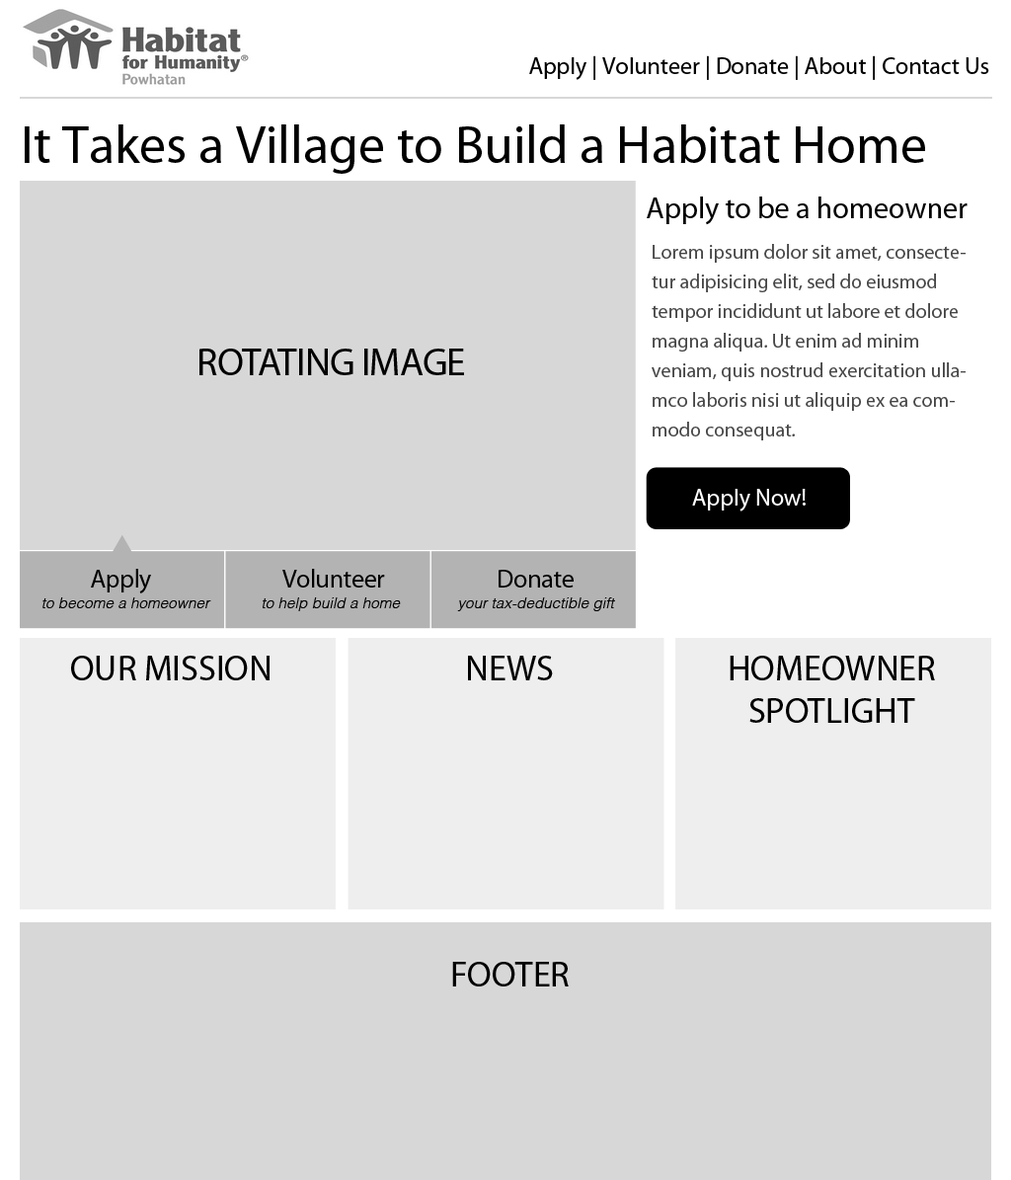
<style>
.page{position:relative;width:1011px;height:1180px;background:#d7d7d7}
.page>*{position:absolute;margin:0}
.t1{font:23.7px "MyriadPro-Regular";color:#010000}
.t2{font:53.3px "MyriadPro-Regular";color:#010000}
.t3{font:29.6px "MyriadPro-Regular";color:#010000}
.t4{font:19.7px/29.6px "MyriadPro-Regular";color:#464646}
.t5{font:38.8px "MyriadPro-Regular";letter-spacing:-0.02em;color:#000000}
.t6{font:23.7px "MyriadPro-Regular";color:#ffffff}
.t7{font:25.9px "MyriadPro-Regular";letter-spacing:-0.02em;color:#010000}
.t8{font:15.1px "Helvetica-LightOblique";color:#010000}
.t9{font:35.5px "MyriadPro-Regular";color:#000000}
</style>
<div class="page">
<p class="t1" style="left:529px;top:55px;width:460px;height:25px">Apply | Volunteer | Donate | About | Contact Us</p>
<p class="t2" style="left:25px;top:124px;width:900px;height:50px">It Takes a Village to Build a Habitat Home</p>
<p class="t3" style="left:647px;top:196px;width:320px;height:29px">Apply to be a homeowner</p>
<p class="t4" style="left:652px;top:244px;width:313px;height:196px">Lorem ipsum dolor sit amet, consectetur adipisicing elit, sed do eiusmod tempor incididunt ut labore et dolore magna aliqua. Ut enim ad minim veniam, quis nostrud exercitation ullamco laboris nisi ut aliquip ex ea commodo consequat.</p>
<p class="t5" style="left:199px;top:348px;width:265px;height:27px">ROTATING IMAGE</p>
<p class="t6" style="left:692px;top:489px;width:114px;height:22px">Apply Now!</p>
<p class="t7" style="left:91px;top:569px;width:60px;height:24px">Apply</p>
<p class="t7" style="left:282px;top:569px;width:103px;height:18px">Volunteer</p>
<p class="t7" style="left:499px;top:570px;width:75px;height:17px">Donate</p>
<p class="t8" style="left:42px;top:597px;width:169px;height:11px">to become a homeowner</p>
<p class="t8" style="left:263px;top:597px;width:138px;height:14px">to help build a home</p>
<p class="t8" style="left:457px;top:597px;width:158px;height:14px">your tax-deductible gift</p>
<p class="t9" style="left:71px;top:655px;width:198px;height:25px">OUR MISSION</p>
<p class="t9" style="left:468px;top:655px;width:85px;height:25px">NEWS</p>
<p class="t9" style="left:730px;top:655px;width:205px;height:68px;text-align:center">HOMEOWNER<br>SPOTLIGHT</p>
<p class="t9" style="left:452px;top:961px;width:117px;height:25px">FOOTER</p>
</div>
